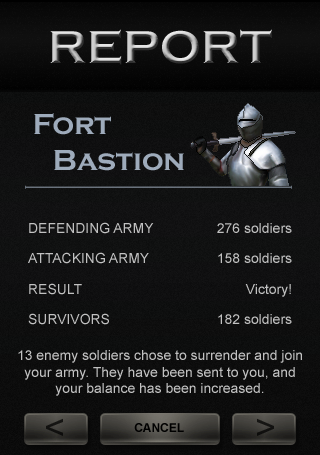
<style>
.page{position:relative;width:320px;height:455px}
.page>*{position:absolute;margin:0}
.t1{font:47.8px "CopperplateGothic-Bold"}
.t2{font:29.9px "CopperplateGothic-Bold";color:#9eabbb}
.t3{font:13.9px "ArialMT";color:#c1c1c1}
.t4{font:12px "Arial-BoldMT";color:#000000}
</style>
<div class="page">
<p class="t1" style="left:50px;top:29px;width:222px;height:36px">REPORT</p>
<p class="t2" style="left:34px;top:113px;width:150px;height:58px;text-align:right">Fort <br>Bastion</p>
<p class="t3" style="left:29px;top:222px;width:125px;height:12px">DEFENDING ARMY</p>
<p class="t3" style="left:217px;top:223px;width:75px;height:10px">276 soldiers</p>
<p class="t3" style="left:28px;top:252px;width:121px;height:12px">ATTACKING ARMY</p>
<p class="t3" style="left:218px;top:253px;width:74px;height:10px">158 soldiers</p>
<p class="t3" style="left:29px;top:283px;width:53px;height:12px">RESULT</p>
<p class="t3" style="left:245px;top:284px;width:46px;height:13px">Victory!</p>
<p class="t3" style="left:28px;top:313px;width:81px;height:12px">SURVIVORS</p>
<p class="t3" style="left:218px;top:314px;width:74px;height:10px">182 soldiers</p>
<p class="t3" style="left:18px;top:350px;width:284px;height:46px;text-align:center">13 enemy soldiers chose to surrender and join<br>your army. They have been sent to you, and<br>your balance has been increased.</p>
<p class="t4" style="left:134px;top:423px;width:50px;height:9px">CANCEL</p>
</div>
